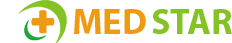
<style>
.page{position:relative;width:232px;height:43px;background:#ffffff}
.page>*{position:absolute;margin:0}
.t1{font:36px "MyriadPro-Bold";color:#ee9b11}
.t2{font:36px "MyriadPro-Bold";color:#85c226}
</style>
<div class="page">
<p class="t1" style="left:74px;top:9px;width:72px;height:25px">MED</p>
<p class="t2" style="left:152px;top:9px;width:80px;height:25px">STAR</p>
</div>
